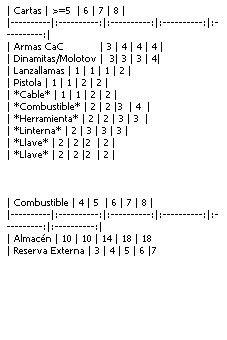
<style>
.page{position:relative;width:227px;height:340px;background:#ffffff}
.page>*{position:absolute;margin:0}
.t1{font:10px "Tahoma";color:#000000}
</style>
<div class="page">
<p class="t1" style="left:7px;top:6px;width:211px;height:250px">| Cartas | &gt;=5  | 6 | 7 | 8 |<br>|----------|:----------:|:----------:|:----------:|:----------:|<br>| Armas CaC            | 3 | 4 | 4 | 4 |<br>| Dinamitas/Molotov |  3| 3 | 3 | 4|<br>| Lanzallamas | 1 | 1 | 1 | 2 |<br>| Pistola | 1 | 1 | 2 | 2 |<br>| *Cable* | 1 | 1 | 2 | 2 |<br>| *Combustible* | 2 | 2 |3  | 4  |<br>| *Herramienta* | 2 | 2 | 3 | 3  |<br>| *Linterna* | 2 | 3 | 3 | 3 |<br>| *Llave* | 2 | 2 |2  | 2 |<br>| *Llave* | 2 | 2 |2  | 2 |<br><br><br><br>| Combustible | 4 | 5  | 6 | 7 | 8 |<br>|----------|:----------:|:----------:|:----------:|:----------:|:----------:|<br>| Almacén | 10 | 10 | 14 | 18 | 18<br>| Reserva Externa | 3 | 4 | 5 | 6 |7</p>
</div>
